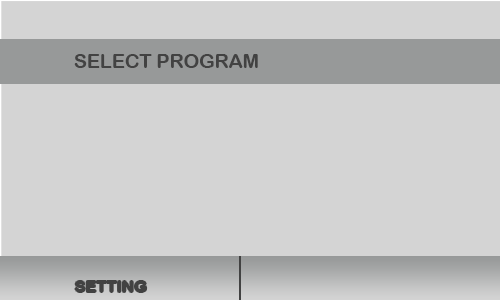
<style>
.page{position:relative;width:500px;height:300px;background:#d4d4d4}
.page>*{position:absolute;margin:0}
.t1{font:4.5px "ArialRoundedMTBold";color:#424242;scale:1.04 1}
.t2{font:15.6px "ArialRoundedMTBold";color:#424242;scale:1.04 1}
</style>
<div class="page">
<p class="t1" style="left:74px;top:54px;width:184px;height:14px">SELECT PROGRAM</p>
<p class="t2" style="left:75px;top:281px;width:72px;height:11px">SETTING</p>
</div>
